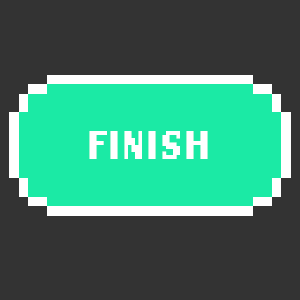
<style>
.page{position:relative;width:300px;height:300px;background:#333333}
.page>*{position:absolute;margin:0}
.t1{font:41.7px "LoRes12OT-Bold";color:#ffffff}
</style>
<div class="page">
<p class="t1" style="left:89px;top:131px;width:119px;height:28px">FINISH</p>
</div>
